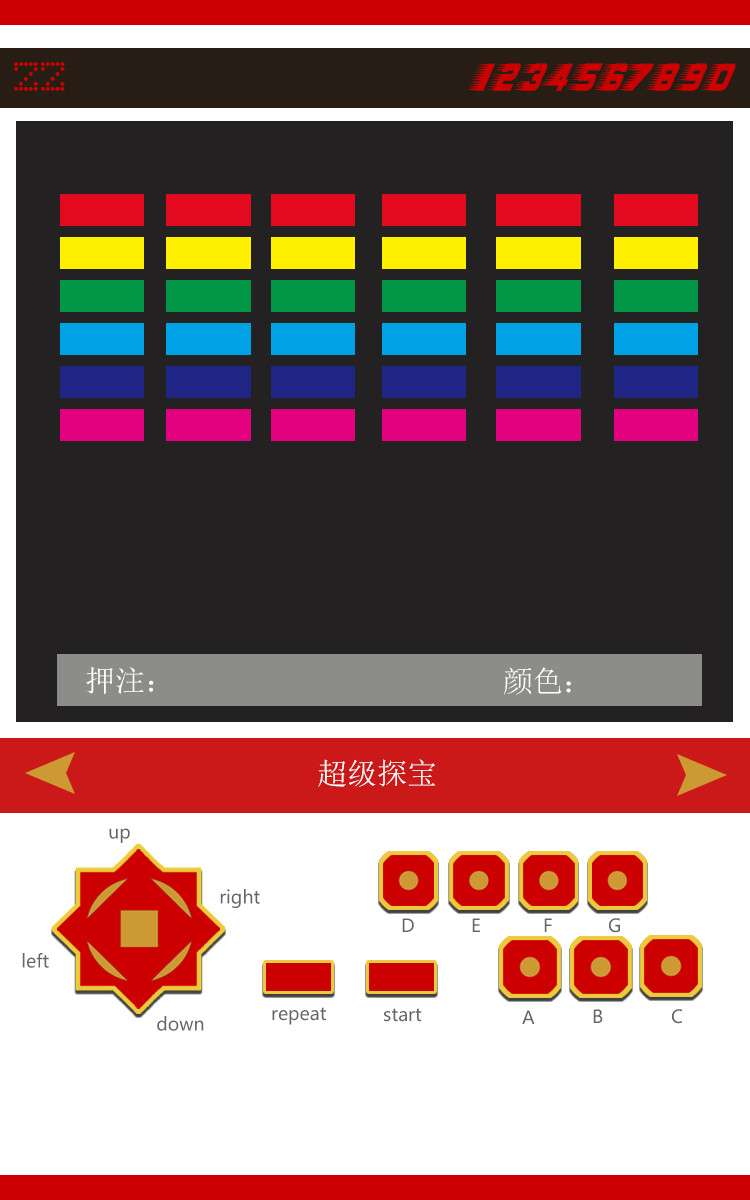
<style>
.page{position:relative;width:750px;height:1200px;background:#232121}
.page>*{position:absolute;margin:0}
.t1{font:48px "8PinMatrix";color:#cc0000}
.t2{font:48px "Barbatrick";letter-spacing:0.1em;color:#cc0000}
.t3{font:30px "SimSun";color:#ffffff}
.t4{font:18px "MicrosoftYaHei";color:#666666}
</style>
<div class="page">
<p class="t1" style="left:14px;top:62px;width:51px;height:29px">zz</p>
<p class="t2" style="left:467px;top:63px;width:269px;height:28px">1234567890</p>
<p class="t3" style="left:86px;top:666px;width:68px;height:28px">押注：</p>
<p class="t3" style="left:503px;top:667px;width:68px;height:28px">颜色：</p>
<p class="t3" style="left:318px;top:759px;width:118px;height:28px">超级探宝</p>
<p class="t4" style="left:109px;top:828px;width:21px;height:15px">up</p>
<p class="t4" style="left:220px;top:889px;width:40px;height:19px">right</p>
<p class="t4" style="left:402px;top:918px;width:12px;height:14px">D</p>
<p class="t4" style="left:472px;top:918px;width:8px;height:14px">E</p>
<p class="t4" style="left:544px;top:918px;width:8px;height:14px">F</p>
<p class="t4" style="left:609px;top:918px;width:11px;height:15px">G</p>
<p class="t4" style="left:22px;top:953px;width:27px;height:15px">left</p>
<p class="t4" style="left:272px;top:1007px;width:54px;height:18px">repeat</p>
<p class="t4" style="left:384px;top:1008px;width:38px;height:14px">start</p>
<p class="t4" style="left:522px;top:1010px;width:13px;height:14px">A</p>
<p class="t4" style="left:593px;top:1009px;width:10px;height:14px">B</p>
<p class="t4" style="left:672px;top:1009px;width:10px;height:15px">C</p>
<p class="t4" style="left:157px;top:1016px;width:47px;height:15px">down</p>
</div>
